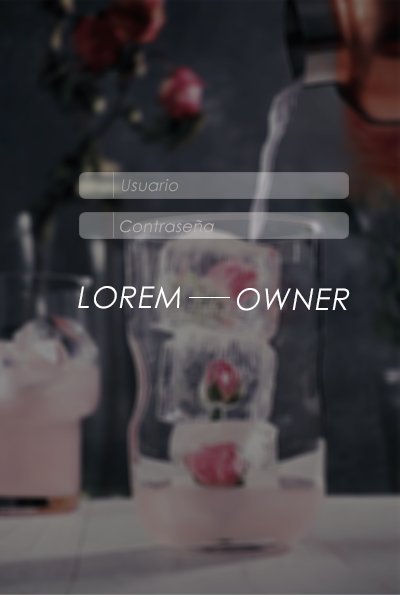
<style>
.page{position:relative;width:400px;height:595px}
.page>*{position:absolute;margin:0}
.t1{font:16px "CenturyGothic";letter-spacing:0.025em;color:#a3a1a1;font-style:italic}
.t2{font:16px "CenturyGothic";letter-spacing:0.025em;color:#b9b1b1;font-style:italic}
.t3{font:30px "CenturyGothic";letter-spacing:0.025em;color:#ffffff;font-style:italic}
</style>
<div class="page">
<p class="t1" style="left:121px;top:179px;width:57px;height:13px">Usuario</p>
<p class="t2" style="left:120px;top:220px;width:94px;height:13px">Contraseña</p>
<p class="t3" style="left:78px;top:286px;width:102px;height:23px">LOREM</p>
<p class="t3" style="left:237px;top:288px;width:113px;height:23px">OWNER</p>
</div>
